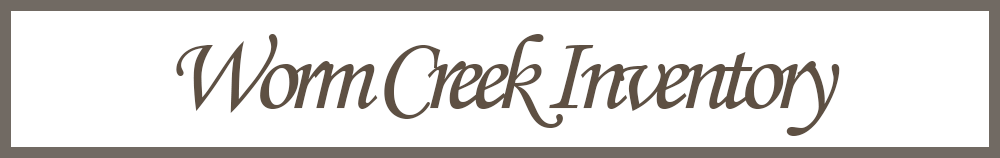
<style>
.page{position:relative;width:1000px;height:158px;background:#ffffff}
.page>*{position:absolute;margin:0}
.t1{font:108px "MonotypeCorsiva";letter-spacing:-0.1em;color:#5e5043}
</style>
<div class="page">
<p class="t1" style="left:176px;top:34px;width:664px;height:102px">Worm Creek Inventory</p>
</div>
